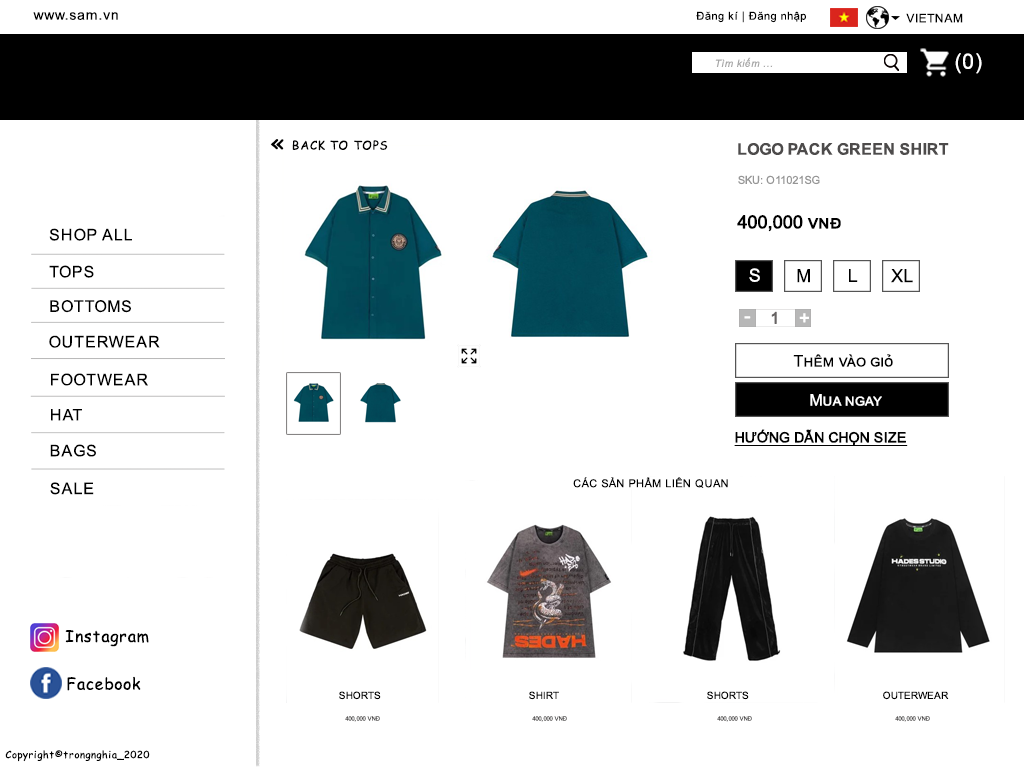
<style>
.page{position:relative;width:1024px;height:768px;background:#ffffff}
.page>*{position:absolute;margin:0}
.t1{font:14px "ArialMT";letter-spacing:0.05em;color:#000000}
.t2{font:11px "ArialMT";letter-spacing:0.05em;color:#000000}
.t3{font:12px "ArialMT";letter-spacing:0.05em;color:#000000}
.t4{font:21px "ArialMT";letter-spacing:0.05em;color:#ffffff}
.t5{font:10px "Arial-ItalicMT";letter-spacing:0.05em;color:#a7a7a7}
.t6{font:24px "ComicSansMS";letter-spacing:0.05em;color:#000000}
.t7{font:12px "ComicSansMS";letter-spacing:0.05em;color:#000000}
.t8{font:16px "Arial-BoldMT";letter-spacing:0.005em;color:#4d4b4b;font-variant:small-caps}
.t9{font:11px "ArialMT";letter-spacing:0.005em;color:#969696;font-variant:small-caps}
.t10{font:18px "ArialMT";letter-spacing:0.005em;color:#000000;font-variant:small-caps;font-weight:bold}
.t11{font:16px "ArialMT";letter-spacing:0.05em;color:#000000}
.t12{font:18px "ArialMT";letter-spacing:0.005em;color:#ffffff;font-variant:small-caps}
.t13{font:18px "ArialMT";letter-spacing:0.005em;color:#000000;font-variant:small-caps}
.t14{font:18px "ArialMT";letter-spacing:0.005em;color:#ffffff;font-variant:small-caps;font-weight:bold}
.t15{font:16px "ArialMT";letter-spacing:0.005em;color:#676363;font-variant:small-caps;font-weight:bold}
.t16{font:16px "ArialMT";letter-spacing:0.005em;color:#000000;font-variant:small-caps}
.t17{font:16px "ArialMT";letter-spacing:0.005em;color:#ffffff;font-variant:small-caps}
.t18{font:14px "ArialMT";letter-spacing:0.005em;color:#010101;font-variant:small-caps;font-weight:bold;text-decoration:underline}
.t19{font:16px "ComicSansMS";letter-spacing:0.05em;color:#000000}
.t20{font:10px "ArialMT";letter-spacing:0.005em;color:#000000;font-variant:small-caps}
.t21{font:6px "ArialMT";letter-spacing:0.005em;color:#4d4b4b;font-variant:small-caps}
.t22{font:10px "ComicSansMS";letter-spacing:0.05em;color:#000000}
</style>
<div class="page">
<p class="t1" style="left:33px;top:12px;width:85px;height:8px">www.sam.vn</p>
<p class="t2" style="left:696px;top:11px;width:110px;height:12px">Đăng kí | Đăng nhập</p>
<p class="t3" style="left:906px;top:13px;width:57px;height:10px">VIETNAM</p>
<p class="t4" style="left:955px;top:53px;width:27px;height:21px">(0)</p>
<p class="t5" style="left:715px;top:57px;width:58px;height:10px">Tìm kiếm ...</p>
<p class="t6" style="left:270px;top:139px;width:14px;height:11px">«</p>
<p class="t7" style="left:292px;top:140px;width:96px;height:11px">BACK TO TOPS</p>
<p class="t8" style="left:738px;top:143px;width:211px;height:12px">LOGO PACK GREEN SHIRT</p>
<p class="t9" style="left:738px;top:175px;width:82px;height:10px">SKU: O11021SG</p>
<p class="t10" style="left:737px;top:215px;width:104px;height:17px">400,000 vnđ</p>
<p class="t11" style="left:49px;top:228px;width:83px;height:13px">SHOP ALL</p>
<p class="t11" style="left:49px;top:265px;width:45px;height:13px">TOPS</p>
<p class="t12" style="left:749px;top:268px;width:11px;height:14px">S</p>
<p class="t13" style="left:797px;top:269px;width:13px;height:14px">M</p>
<p class="t13" style="left:849px;top:269px;width:9px;height:13px">L</p>
<p class="t13" style="left:891px;top:269px;width:22px;height:14px">XL</p>
<p class="t11" style="left:50px;top:300px;width:81px;height:13px">BOTTOMS</p>
<p class="t14" style="left:744px;top:316px;width:7px;height:3px">-</p>
<p class="t15" style="left:771px;top:311px;width:6px;height:13px">1</p>
<p class="t14" style="left:799px;top:313px;width:10px;height:10px">+</p>
<p class="t11" style="left:49px;top:335px;width:111px;height:13px">OUTERWEAR</p>
<p class="t16" style="left:793px;top:354px;width:100px;height:13px">Thêm vào giỏ</p>
<p class="t11" style="left:51px;top:373px;width:97px;height:13px">FOOTWEAR</p>
<p class="t17" style="left:810px;top:394px;width:72px;height:12px">Mua ngay</p>
<p class="t11" style="left:51px;top:409px;width:31px;height:12px">HAT</p>
<p class="t18" style="left:734px;top:429px;width:174px;height:17px">HƯỚNG DẪN CHỌN SIZE</p>
<p class="t11" style="left:50px;top:444px;width:46px;height:13px">BAGS</p>
<p class="t11" style="left:50px;top:482px;width:44px;height:13px">SALE</p>
<p class="t2" style="left:573px;top:477px;width:155px;height:11px">CÁC SẢN PHẨM LIÊN QUAN</p>
<p class="t19" style="left:65px;top:630px;width:84px;height:17px">Instagram</p>
<p class="t19" style="left:67px;top:676px;width:74px;height:15px">Facebook</p>
<p class="t20" style="left:339px;top:691px;width:42px;height:9px">SHORTS</p>
<p class="t20" style="left:529px;top:691px;width:30px;height:9px">SHIRT</p>
<p class="t20" style="left:707px;top:691px;width:42px;height:9px">SHORTS</p>
<p class="t20" style="left:883px;top:691px;width:66px;height:9px">OUTERWEAR</p>
<p class="t21" style="left:345px;top:716px;width:35px;height:6px">400,000 VNĐ</p>
<p class="t21" style="left:532px;top:716px;width:35px;height:6px">400,000 VNĐ</p>
<p class="t21" style="left:717px;top:716px;width:35px;height:6px">400,000 VNĐ</p>
<p class="t21" style="left:895px;top:716px;width:35px;height:6px">400,000 VNĐ</p>
<p class="t22" style="left:5px;top:750px;width:145px;height:12px">Copyright©trongnghia_2020</p>
</div>
